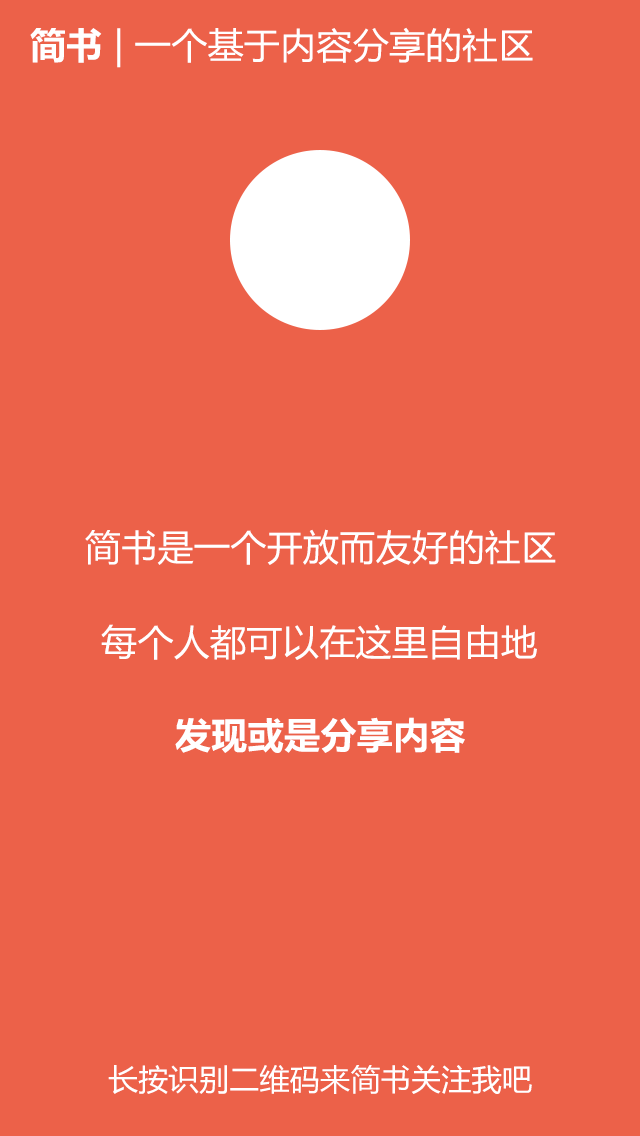
<style>
.page{position:relative;width:640px;height:1136px;background:#ec6149}
.page>*{position:absolute;margin:0}
.t1{font:36px "MicrosoftYaHei";letter-spacing:0.01em;color:#ffffff}
.t2{font:36px "MicrosoftYaHei-Bold";letter-spacing:0.01em;color:#ffffff}
.t3{font:30px "MicrosoftYaHei";letter-spacing:0.01em;color:#ffffff}
</style>
<div class="page">
<p class="t1" style="left:30px;top:27px;width:503px;height:41px"><span class="t2">简书</span> | 一个基于内容分享的社区</p>
<p class="t1" style="left:85px;top:529px;width:471px;height:36px">简书是一个开放而友好的社区</p>
<p class="t1" style="left:101px;top:624px;width:436px;height:36px">每个人都可以在这里自由地</p>
<p class="t2" style="left:175px;top:717px;width:290px;height:36px"><span class="t1"> </span>发现或是分享内容</p>
<p class="t3" style="left:108px;top:1065px;width:424px;height:29px">长按识别二维码来简书关注我吧</p>
</div>
